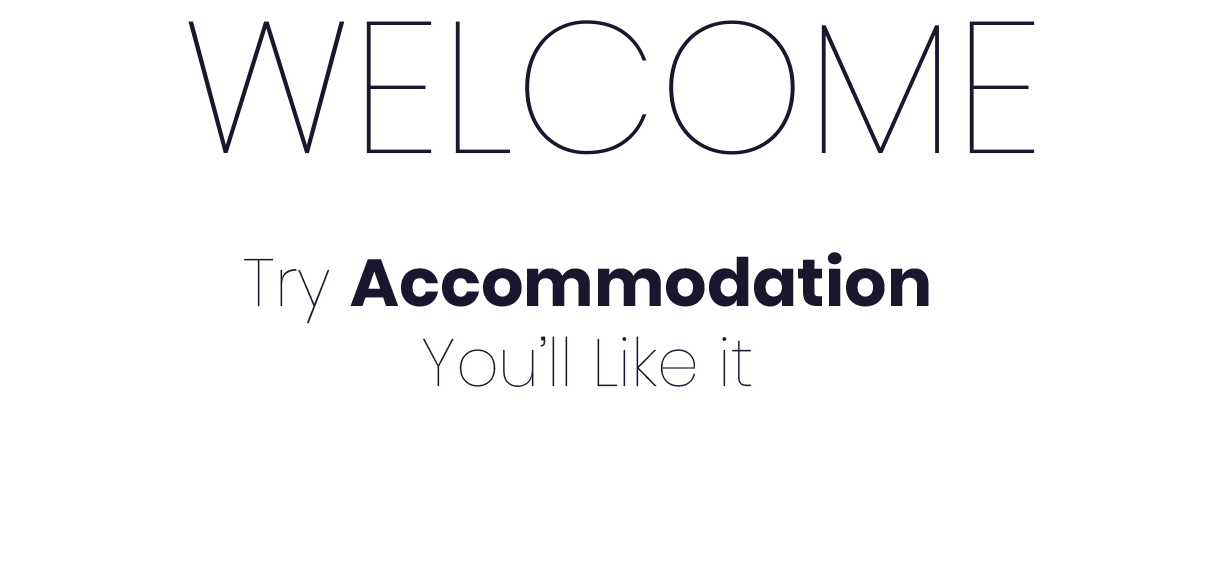
<style>
.page{position:relative;width:1225px;height:566px;background:#ffffff}
.page>*{position:absolute;margin:0}
.t1{font:186.6px "Poppins-Thin";color:#1b152e}
.t2{font:66.7px "Poppins-Thin";color:#1b152e}
.t3{font:66.7px "Poppins-Bold";color:#1b152e}
</style>
<div class="page">
<p class="t1" style="left:188px;top:20px;width:847px;height:135px">WELCOME</p>
<p class="t2" style="left:244px;top:252px;width:685px;height:135px;text-align:center">Try <span class="t3">Accommodation<br></span>You’ll Like it</p>
</div>
